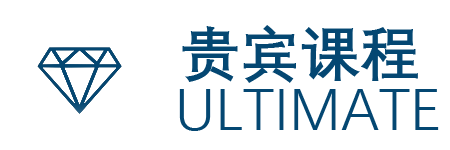
<style>
.page{position:relative;width:450px;height:150px;background:#ffffff}
.page>*{position:absolute;margin:0}
.t1{font:60px "DengXian-Bold";color:#044772}
.t2{font:60px "DengXian-Regular";color:#044772}
</style>
<div class="page">
<p class="t1" style="left:182px;top:25px;width:236px;height:58px">贵宾课程</p>
<p class="t2" style="left:179px;top:89px;width:260px;height:42px">ULTIMATE</p>
</div>
